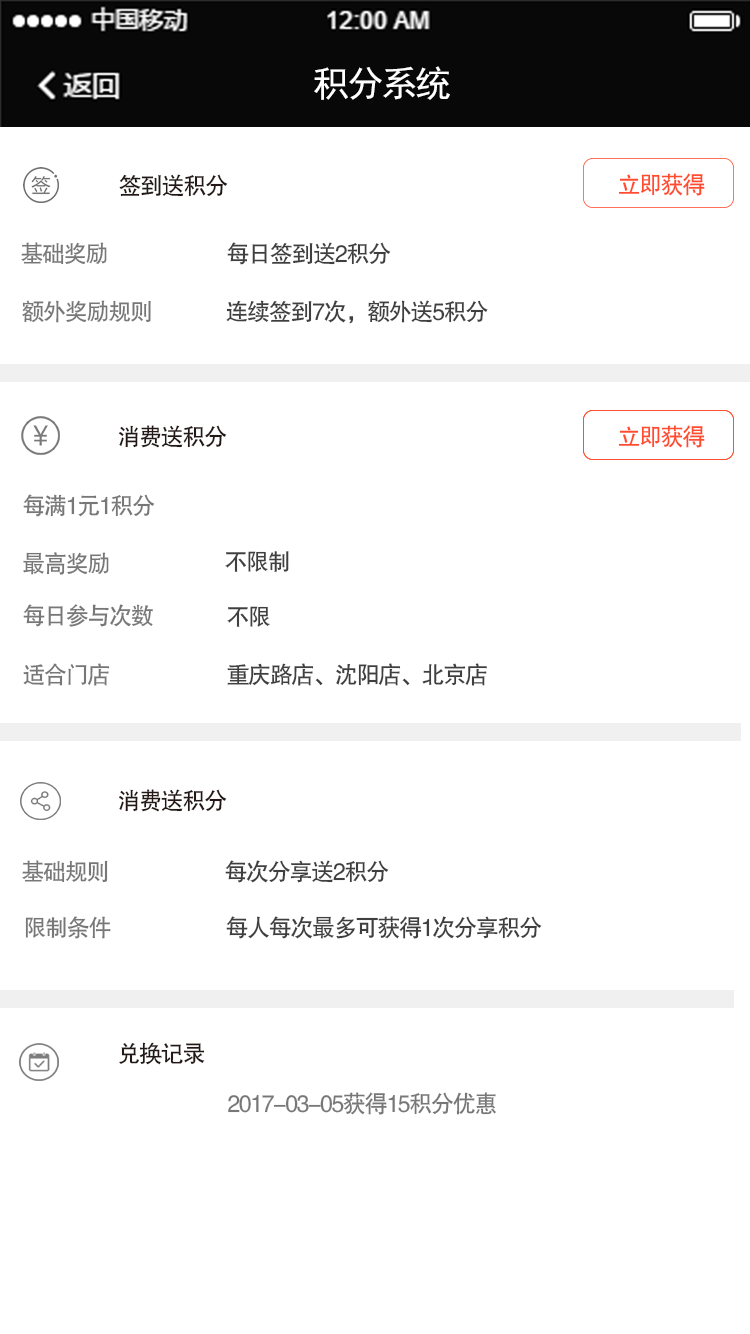
<style>
.page{position:relative;width:750px;height:1334px;background:#ffffff}
.page>*{position:absolute;margin:0}
.t1{font:36px "SimHei";letter-spacing:-0.06em;color:#ffffff}
.t2{font:24px "FZHTK--GBK1-0";letter-spacing:-0.06em;color:#231815;scale:0.96 1}
.t3{font:24px "FZHTK--GBK1-0";letter-spacing:-0.06em;color:#ff4c2e;scale:0.96 1}
.t4{font:24px "FZHTK--GBK1-0";letter-spacing:-0.06em;color:#818182;scale:0.96 1}
.t5{font:24px "FZHTK--GBK1-0";letter-spacing:-0.06em;color:#403f3f;scale:0.96 1}
</style>
<div class="page">
<p class="t1" style="left:314px;top:66px;width:136px;height:34px">积分系统</p>
<p class="t2" style="left:119px;top:174px;width:109px;height:23px">签到送积分</p>
<p class="t3" style="left:618px;top:173px;width:87px;height:23px">立即获得</p>
<p class="t4" style="left:21px;top:242px;width:86px;height:23px">基础奖励</p>
<p class="t5" style="left:227px;top:242px;width:164px;height:23px">每日签到送2积分</p>
<p class="t4" style="left:22px;top:300px;width:129px;height:23px">额外奖励规则</p>
<p class="t5" style="left:226px;top:300px;width:262px;height:24px">连续签到7次，额外送5积分</p>
<p class="t2" style="left:119px;top:425px;width:108px;height:23px">消费送积分</p>
<p class="t3" style="left:618px;top:425px;width:87px;height:23px">立即获得</p>
<p class="t4" style="left:23px;top:494px;width:132px;height:23px">每满1元1积分</p>
<p class="t4" style="left:23px;top:552px;width:86px;height:23px">最高奖励</p>
<p class="t5" style="left:225px;top:551px;width:64px;height:21px">不限制</p>
<p class="t4" style="left:23px;top:604px;width:130px;height:23px">每日参与次数</p>
<p class="t5" style="left:227px;top:606px;width:43px;height:21px">不限</p>
<p class="t4" style="left:23px;top:663px;width:87px;height:23px">适合门店</p>
<p class="t5" style="left:227px;top:663px;width:260px;height:23px">重庆路店、沈阳店、北京店</p>
<p class="t2" style="left:119px;top:789px;width:108px;height:23px">消费送积分</p>
<p class="t4" style="left:22px;top:860px;width:86px;height:23px">基础规则</p>
<p class="t5" style="left:225px;top:860px;width:164px;height:23px">每次分享送2积分</p>
<p class="t4" style="left:25px;top:916px;width:86px;height:23px">限制条件</p>
<p class="t5" style="left:226px;top:916px;width:316px;height:23px">每人每次最多可获得1次分享积分</p>
<p class="t2" style="left:119px;top:1042px;width:86px;height:23px">兑换记录</p>
<p class="t4" style="left:228px;top:1092px;width:268px;height:23px">2017-03-05获得15积分优惠</p>
</div>
